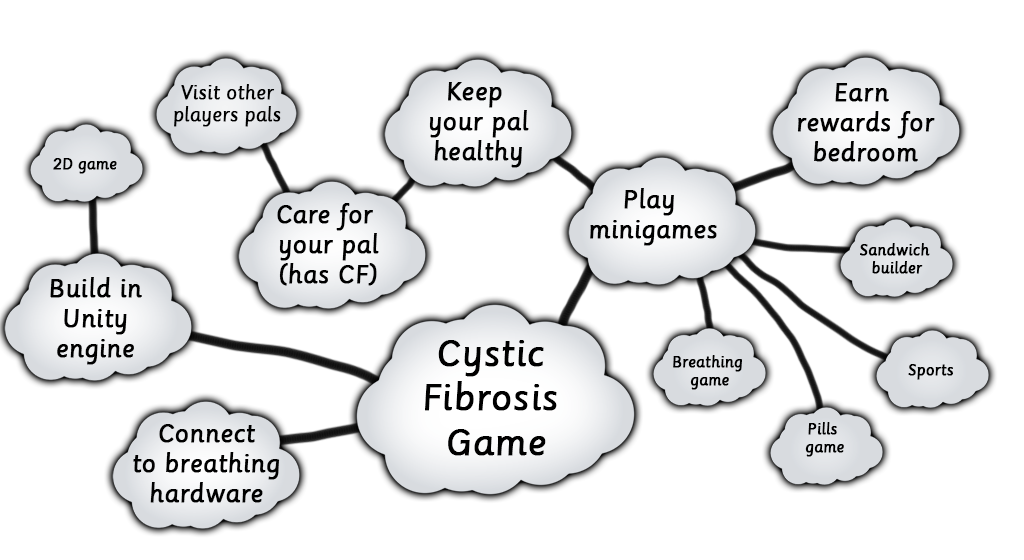
<style>
.page{position:relative;width:1024px;height:560px;background:#ffffff}
.page>*{position:absolute;margin:0}
.t1{font:18.6px "Sassoon-Primary";color:#000000;font-weight:bold}
.t2{font:24.8px "Sassoon-Primary";color:#000000;font-weight:bold}
.t3{font:15.1px "Sassoon-Primary";color:#000000;font-weight:bold}
.t4{font:36.9px "Sassoon-Primary";color:#000000;font-weight:bold}
</style>
<div class="page">
<p class="t1" style="left:174px;top:84px;width:107px;height:43px;text-align:center">Visit other<br>players pals</p>
<p class="t2" style="left:429px;top:82px;width:100px;height:86px;text-align:center">Keep <br>your pal<br>healthy</p>
<p class="t2" style="left:797px;top:83px;width:138px;height:79px;text-align:center">Earn <br>rewards for<br>bedroom</p>
<p class="t3" style="left:53px;top:158px;width:64px;height:16px">2D game</p>
<p class="t2" style="left:590px;top:188px;width:127px;height:58px;text-align:center">Play <br>minigames</p>
<p class="t2" style="left:277px;top:203px;width:102px;height:83px;text-align:center">Care for <br>your pal<br>(has CF)</p>
<p class="t3" style="left:860px;top:243px;width:70px;height:31px;text-align:center">Sandwich <br>builder</p>
<p class="t2" style="left:50px;top:277px;width:92px;height:88px;text-align:center">Build in<br>Unity<br>engine</p>
<p class="t4" style="left:425px;top:340px;width:132px;height:116px;text-align:center">Cystic <br>Fibrosis <br>Game</p>
<p class="t3" style="left:673px;top:355px;width:69px;height:35px;text-align:center">Breathing <br>game</p>
<p class="t3" style="left:908px;top:364px;width:45px;height:16px">Sports</p>
<p class="t2" style="left:133px;top:424px;width:147px;height:79px;text-align:center">Connect<br>to breathing<br>hardware</p>
<p class="t3" style="left:805px;top:422px;width:39px;height:35px;text-align:center">Pills <br>game</p>
</div>
